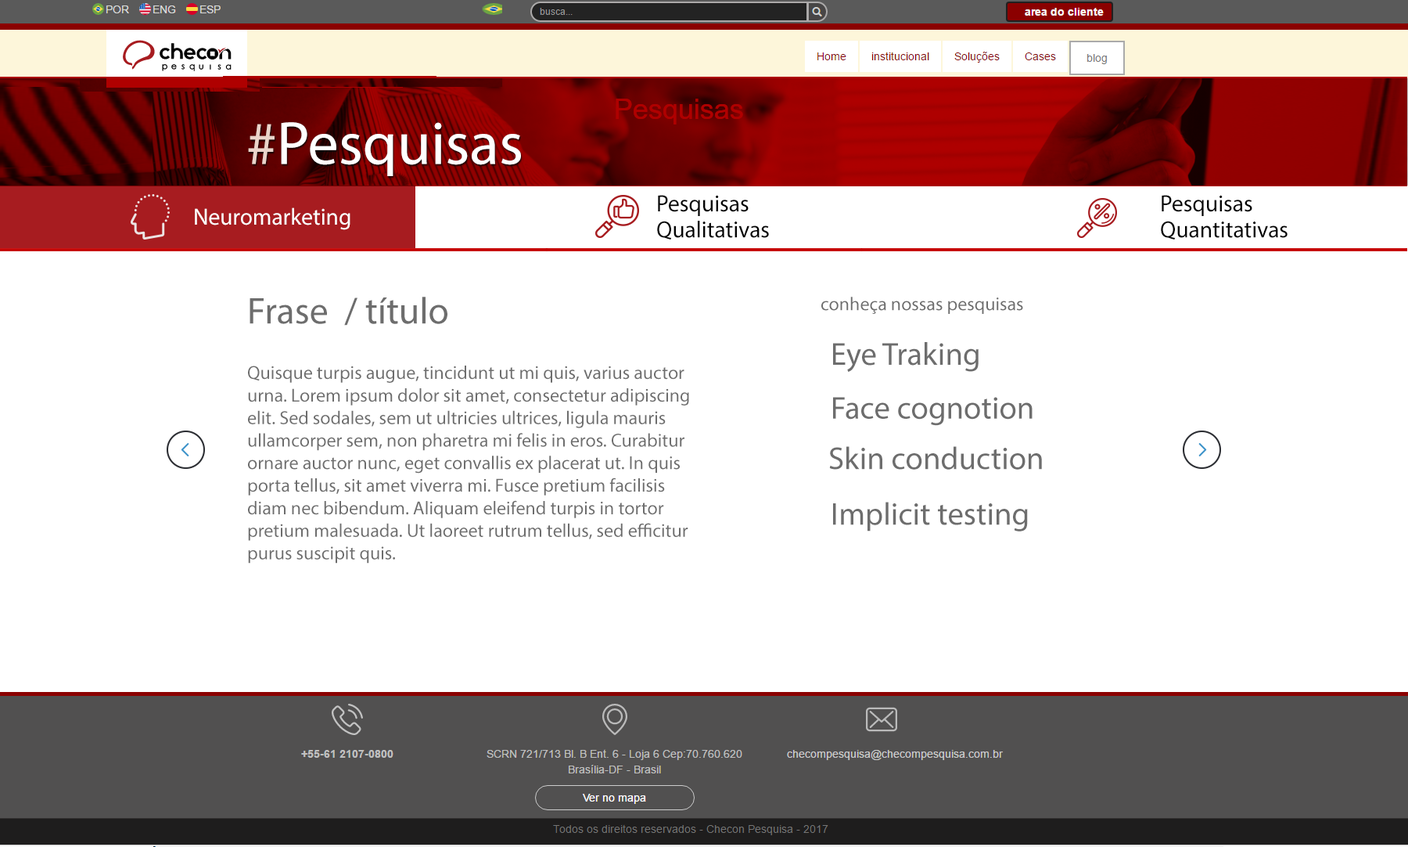
<style>
.page{position:relative;width:1408px;height:847px;background:#ffffff}
.page>*{position:absolute;margin:0}
.t1{font:61.2px "MyriadPro-Regular";color:#ffffff}
.t2{font:61.2px "MyriadPro-Regular";color:#ead4ca}
.t3{font:23.5px/19.6px "MyriadPro-Regular";color:#000000}
.t4{font:23.5px "MyriadPro-Regular";color:#ffffff}
.t5{font:18.8px "MyriadPro-Regular";color:#6d6d6d}
.t6{font:37.6px "MyriadPro-Regular";color:#6d6d6d}
.t7{font:31.9px "MyriadPro-Regular";color:#6d6d6d}
.t8{font:31.8px "MyriadPro-Regular";color:#6d6d6d}
</style>
<div class="page">
<p class="t1" style="left:248px;top:122px;width:273px;height:54px"><span class="t2">#</span>Pesquisas</p>
<p class="t3" style="left:657px;top:195px;width:112px;height:44px">Pesquisas<br>Qualitativas</p>
<p class="t3" style="left:1161px;top:195px;width:127px;height:44px">Pesquisas<br>Quantitativas</p>
<p class="t4" style="left:195px;top:207px;width:156px;height:23px">Neuromarketing</p>
<p class="t5" style="left:248px;top:297px;width:441px;height:266px"><span class="t6">Frase  / título<br><br></span>Quisque turpis augue, tincidunt ut mi quis, varius auctor urna. Lorem ipsum dolor sit amet, consectetur adipiscing elit. Sed sodales, sem ut ultricies ultrices, ligula mauris ullamcorper sem, non pharetra mi felis in eros. Curabitur ornare auctor nunc, eget convallis ex placerat ut. In quis porta tellus, sit amet viverra mi. Fusce pretium facilisis diam nec bibendum. Aliquam eleifend turpis in tortor pretium malesuada. Ut laoreet rutrum tellus, sed efficitur purus suscipit quis.</p>
<p class="t5" style="left:822px;top:297px;width:201px;height:17px">conheça nossas pesquisas</p>
<p class="t7" style="left:833px;top:342px;width:146px;height:30px">Eye Traking</p>
<p class="t8" style="left:833px;top:397px;width:200px;height:29px">Face cognotion</p>
<p class="t8" style="left:829px;top:446px;width:213px;height:23px">Skin conduction</p>
<p class="t8" style="left:833px;top:502px;width:195px;height:29px">Implicit testing</p>
</div>
